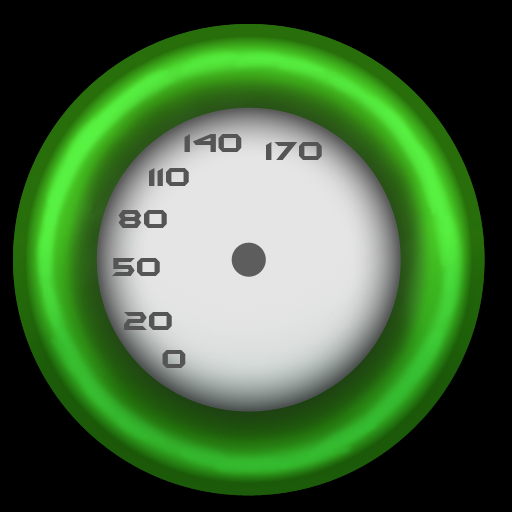
<style>
.page{position:relative;width:512px;height:512px;background:#000000}
.page>*{position:absolute;margin:0}
.t1{font:30px "BatmanForeverAlternate";color:#555555}
</style>
<div class="page">
<p class="t1" style="left:184px;top:134px;width:58px;height:18px">140</p>
<p class="t1" style="left:266px;top:142px;width:56px;height:18px">170</p>
<p class="t1" style="left:149px;top:168px;width:40px;height:18px">110</p>
<p class="t1" style="left:118px;top:210px;width:49px;height:18px">80</p>
<p class="t1" style="left:112px;top:258px;width:48px;height:18px">50</p>
<p class="t1" style="left:124px;top:312px;width:48px;height:18px">20</p>
<p class="t1" style="left:162px;top:350px;width:24px;height:18px">0</p>
</div>
